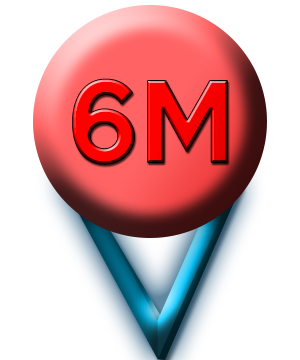
<style>
.page{position:relative;width:300px;height:360px;background:#ffffff}
.page>*{position:absolute;margin:0}
.t1{font:101px "KeepCalm-Medium"}
</style>
<div class="page">
<p class="t1" style="left:73px;top:79px;width:154px;height:85px">6M</p>
</div>
